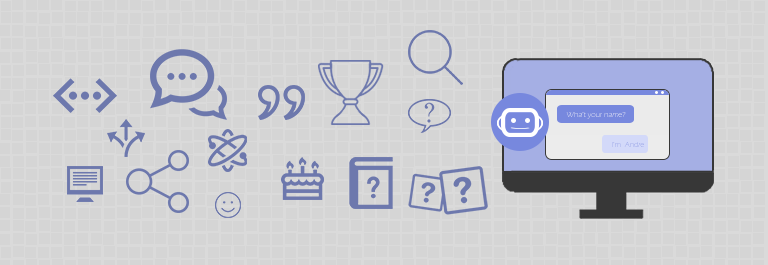
<style>
.page{position:relative;width:768px;height:265px;background:#d5d5d5}
.page>*{position:absolute;margin:0}
.t1{font:7.6px "ErasITC-Light"}
</style>
<div class="page">
<p class="t1" style="left:566px;top:112px;width:60px;height:7px">Wha’t your name?</p>
<p class="t1" style="left:612px;top:142px;width:32px;height:5px">I’m  Andre</p>
</div>
